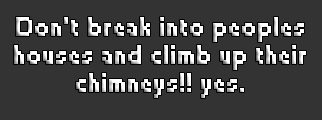
<style>
.page{position:relative;width:322px;height:120px;background:#333333}
.page>*{position:absolute;margin:0}
.t1{font:24px/28px "Small Fonts";font-weight:bold}
</style>
<div class="page">
<p class="t1" style="left:14px;top:17px;width:292px;height:81px;text-align:center">Don’t break into peoples<br>houses and climb up their<br>chimneys!! yes.</p>
</div>
